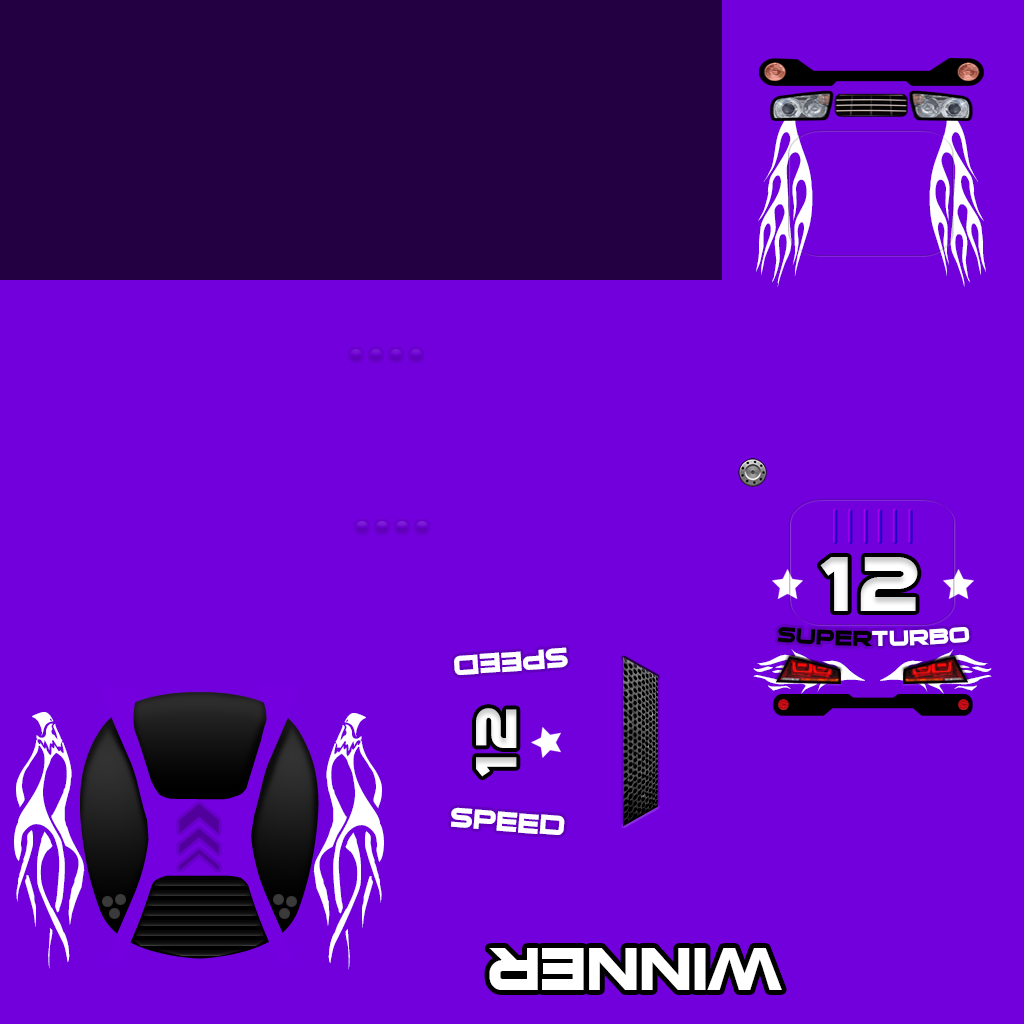
<style>
.page{position:relative;width:1024px;height:1024px;background:#7200dd}
.page>*{position:absolute;margin:0}
.t1{font:89.2px "VehicleDecals'Flames&Art'";color:#ffffff;font-variant:small-caps;scale:0.86 1}
.t2{font:70.1px "SuiGenerisBold";letter-spacing:0.1em;color:#ffffff;font-variant:small-caps}
.t3{font:30px "SuiGenerisBold";color:#000000;font-variant:small-caps}
.t4{font:30px "SuiGenerisBold";color:#ffffff;font-variant:small-caps}
.t5{font:36.8px "SuiGenerisBold";color:#ffffff;font-variant:small-caps}
.t6{font:72px "VehicleDecals'Flames&Art'";font-variant:small-caps;scale:0.49 1}
.t7{font:79.7px "VehicleDecals'Flames&Art'";color:#ffffff;font-variant:small-caps;scale:0.8 1}
.t8{font:53.2px "SuiGenerisBold";letter-spacing:0.1em;color:#ffffff;font-variant:small-caps;scale:0.93 1}
.t9{font:78.7px "SuiGenerisBold";color:#ffffff;font-variant:small-caps}
</style>
<div class="page">
<p class="t1" style="left:756px;top:101px;width:57px;height:186px;rotate:90deg">c</p>
<p class="t1" style="left:929px;top:101px;width:57px;height:186px;rotate:90deg">c</p>
<p class="t2" style="left:820px;top:557px;width:98px;height:54px">12</p>
<p class="t3" style="left:777px;top:627px;width:193px;height:19px">super<span class="t4">turbo</span></p>
<p class="t5" style="left:454px;top:647px;width:114px;height:28px;rotate:176deg">speed</p>
<p class="t6" style="left:753px;top:649px;width:112px;height:45px;rotate:180deg">s</p>
<p class="t6" style="left:880px;top:649px;width:112px;height:45px">s</p>
<p class="t7" style="left:14px;top:712px;width:71px;height:257px;rotate:90deg">4</p>
<p class="t7" style="left:313px;top:713px;width:71px;height:257px;rotate:90deg">4</p>
<p class="t8" style="left:476px;top:708px;width:41px;height:69px;rotate:-90deg">12</p>
<p class="t5" style="left:451px;top:807px;width:114px;height:28px;rotate:5deg">speed</p>
<p class="t9" style="left:489px;top:948px;width:293px;height:42px;rotate:180deg">winner</p>
</div>
